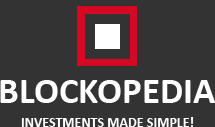
<style>
.page{position:relative;width:215px;height:127px;background:#333333}
.page>*{position:absolute;margin:0}
.t1{font:37px "Calibri-Bold";color:#ffffff}
.t2{font:14px "Calibri-Bold";color:#ffffff}
</style>
<div class="page">
<p class="t1" style="left:0px;top:80px;width:215px;height:23px">BLOCKOPEDIA</p>
<p class="t2" style="left:21px;top:117px;width:173px;height:10px">INVESTMENTS MADE SIMPLE!</p>
</div>
